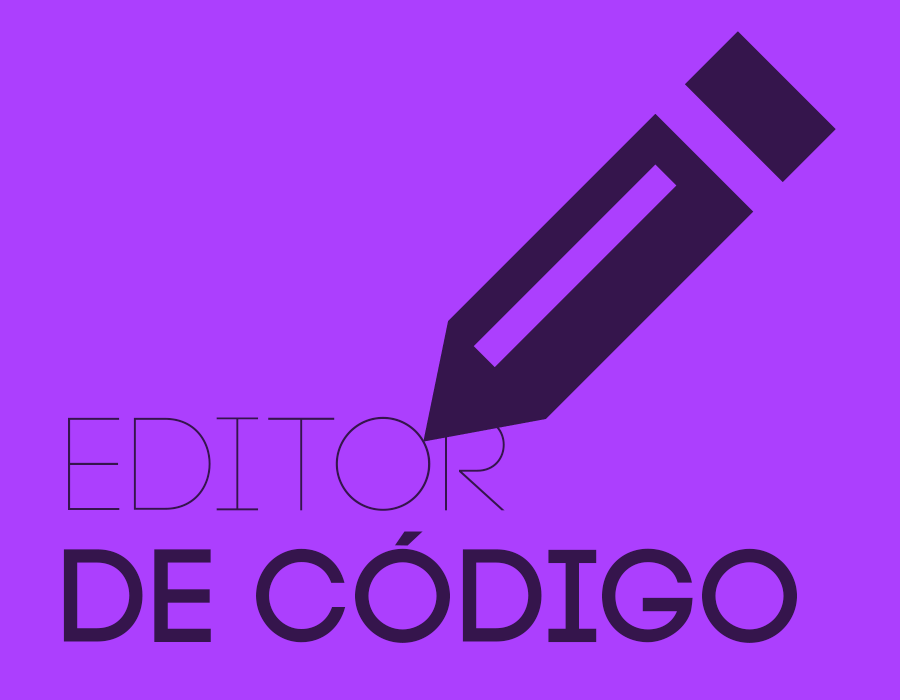
<style>
.page{position:relative;width:900px;height:700px;background:#ac3ffe}
.page>*{position:absolute;margin:0}
.t1{font:131.7px/131.7px "Code-Pro-Demo";color:#35154c}
.t2{font:131.7px/131.7px "Code-Pro-Light-Demo";color:#35154c}
</style>
<div class="page">
<p class="t1" style="left:63px;top:416px;width:734px;height:227px"><span class="t2">editor<br></span>de código</p>
</div>
